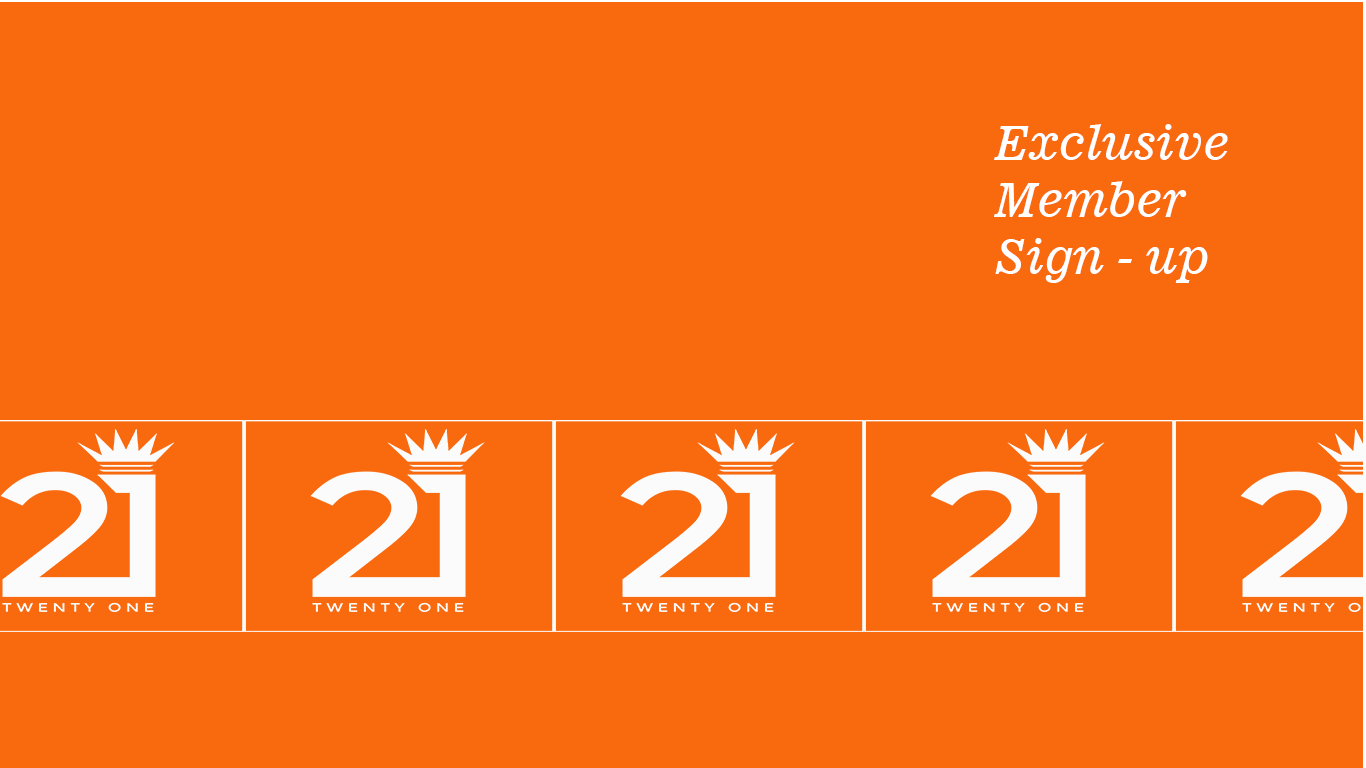
<style>
.page{position:relative;width:1366px;height:768px;background:#f9690e}
.page>*{position:absolute;margin:0}
.t1{font:47.4px "News701BT-ItalicA";color:#ffffff}
</style>
<div class="page">
<p class="t1" style="left:994px;top:124px;width:234px;height:159px">Exclusive <br>Member <br>Sign - up</p>
</div>
